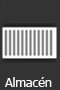
<style>
.page{position:relative;width:60px;height:90px;background:#333333}
.page>*{position:absolute;margin:0}
.t1{font:12.5px "Tahoma";color:#ffffff}
</style>
<div class="page">
<p class="t1" style="left:5px;top:77px;width:47px;height:10px">Almacén</p>
</div>
